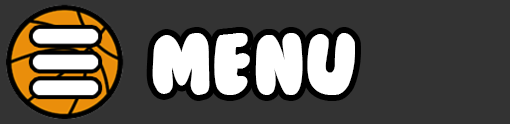
<style>
.page{position:relative;width:510px;height:124px;background:#333333}
.page>*{position:absolute;margin:0}
.t1{font:80px "BubbleGum";color:#ffffff}
</style>
<div class="page">
<p class="t1" style="left:152px;top:33px;width:203px;height:62px">menu</p>
</div>
